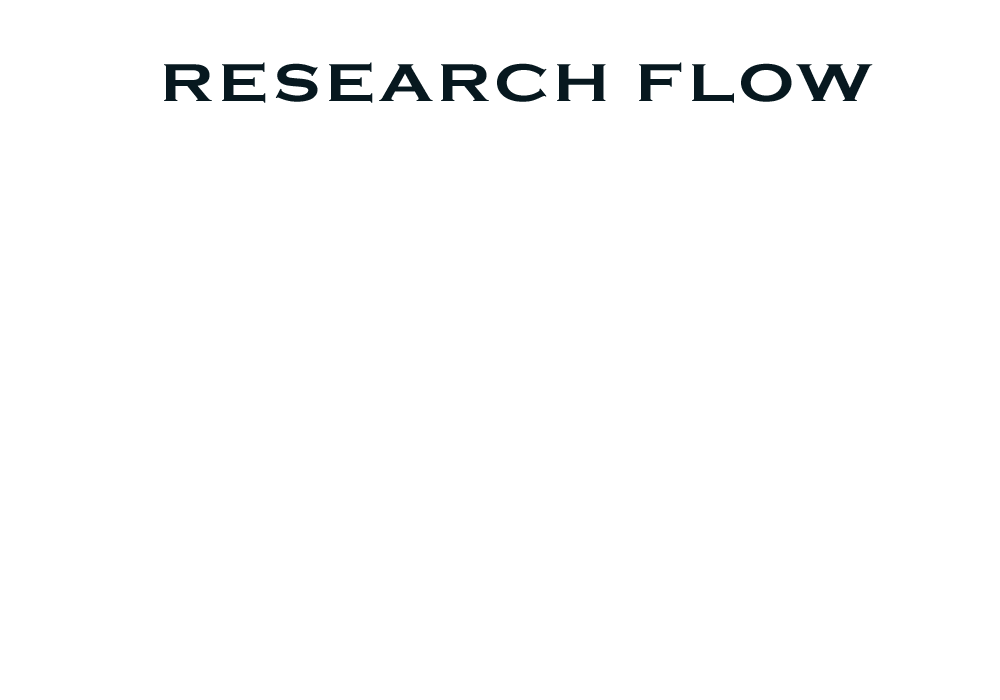
<style>
.page{position:relative;width:1000px;height:700px;background:#ffffff}
.page>*{position:absolute;margin:0}
.t1{font:55px "CopperplateGothic-Bold";letter-spacing:0.08em;color:#07181f;scale:1.2 1}
</style>
<div class="page">
<p class="t1" style="left:164px;top:62px;width:709px;height:41px">RESEARCH FLOW</p>
</div>
